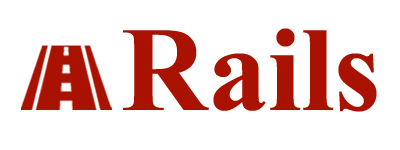
<style>
.page{position:relative;width:400px;height:150px;background:#ffffff}
.page>*{position:absolute;margin:0}
.t1{font:120px "TimesNewRomanPS-BoldMT";color:#a91100}
</style>
<div class="page">
<p class="t1" style="left:123px;top:28px;width:254px;height:84px">Rails</p>
</div>
